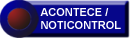
<style>
.page{position:relative;width:130px;height:38px;background:#06068a}
.page>*{position:absolute;margin:0}
.t1{font:11px "Arial-BoldMT";color:#ffffff}
</style>
<div class="page">
<p class="t1" style="left:40px;top:8px;width:81px;height:21px">ACONTECE / NOTICONTROL</p>
</div>
